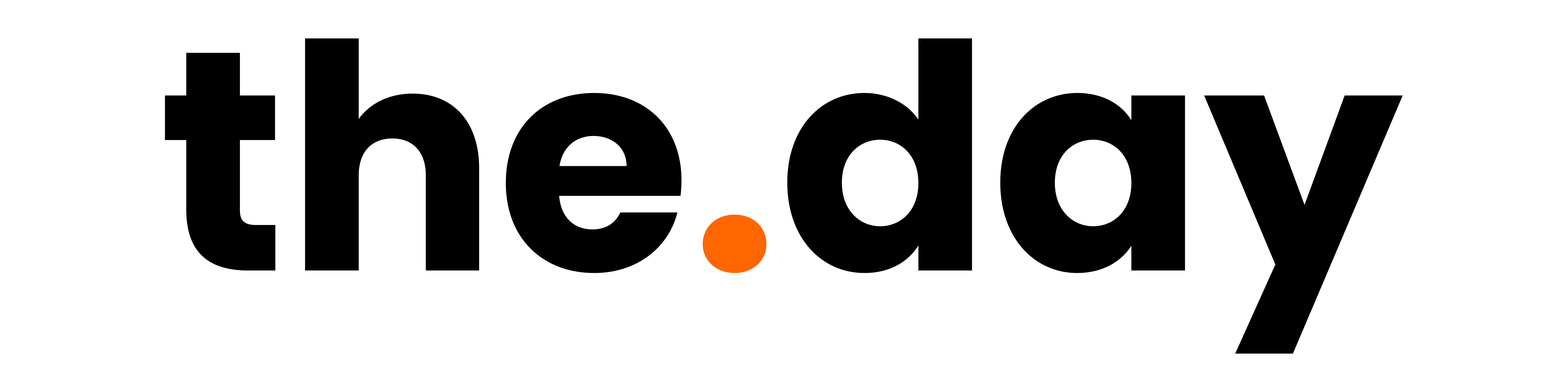
<style>
.page{position:relative;width:1568px;height:392px;background:#ffffff}
.page>*{position:absolute;margin:0}
.t1{font:313.6px "Poppins-Bold";color:#000000}
.t2{font:313.6px "Poppins-Bold";color:#ff6600}
</style>
<div class="page">
<p class="t1" style="left:165px;top:38px;width:1238px;height:316px">the<span class="t2">.</span>day</p>
</div>
